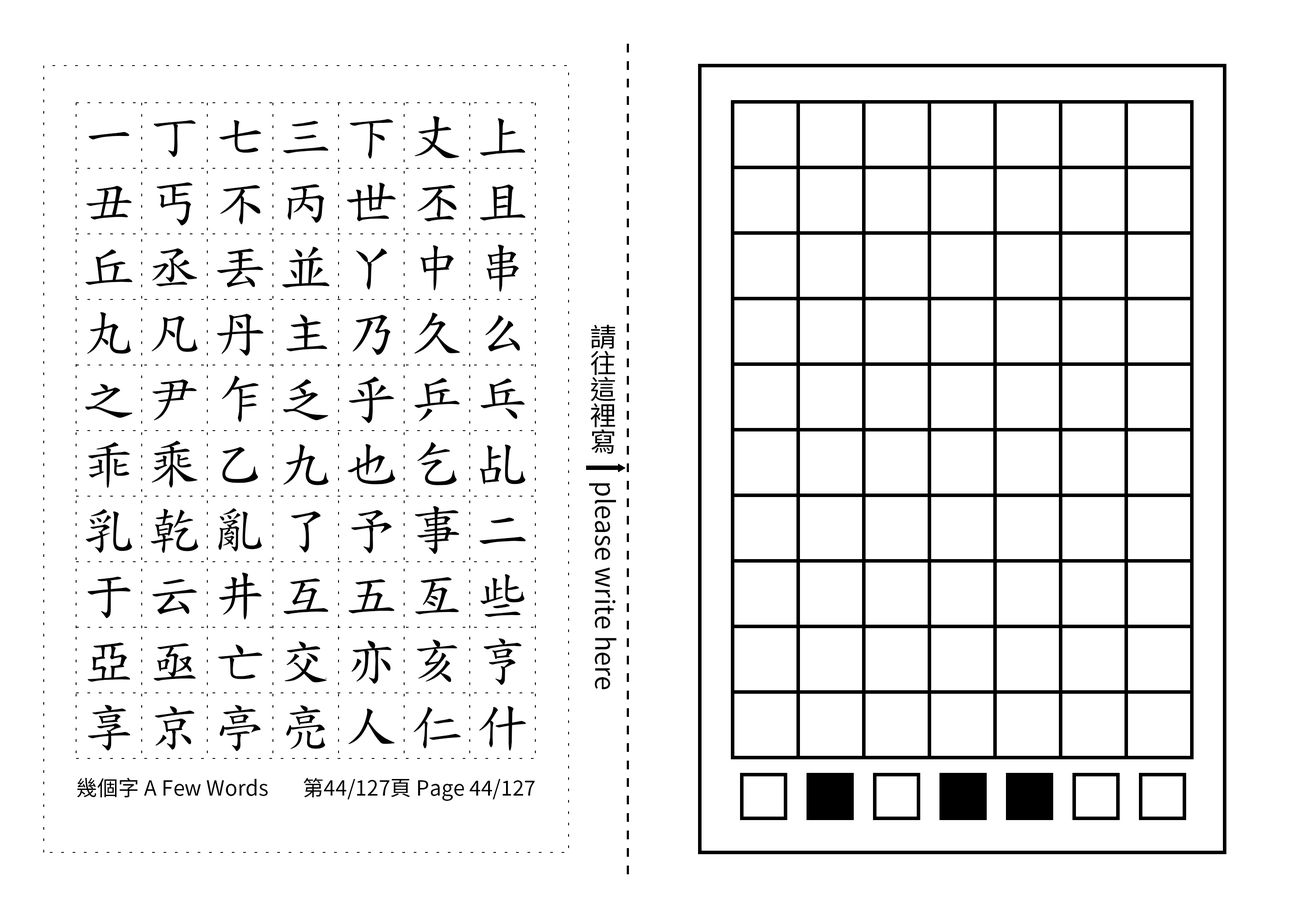
<style>
.page{position:relative;width:1299px;height:918px;background:#ffffff}
.page>*{position:absolute;margin:0}
.t1{font:52.5px/65.6px "TW-Kai-98_1";letter-spacing:0.25em;color:#000000}
.t2{font:26.2px "SourceHanSansTC-Regular";color:#000000}
.t3{font:21px "SourceHanSansTC-Regular";color:#000000}
</style>
<div class="page">
<p class="t1" style="left:85px;top:116px;width:441px;height:636px;text-align:center">一丁七三下丈上丑丐不丙世丕且丘丞丟並丫中串丸凡丹主乃久么之尹乍乏乎乒乓乖乘乙九也乞乩乳乾亂了予事二于云井互五亙些亞亟亡交亦亥亨享京亭亮人仁什</p>
<p class="t2" style="left:589px;top:324px;width:28px;height:366px;text-align:center">請往這裡寫　please write here</p>
<p class="t3" style="left:77px;top:778px;width:191px;height:20px">幾個字 A Few Words</p>
<p class="t3" style="left:303px;top:778px;width:232px;height:23px">第44/127頁 Page 44/127</p>
</div>
